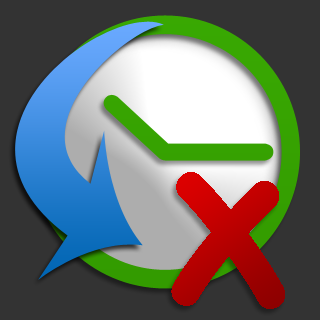
<style>
.page{position:relative;width:320px;height:320px;background:#333333}
.page>*{position:absolute;margin:0}
.t1{font:257.2px "AppleCasual"}
</style>
<div class="page">
<p class="t1" style="left:171px;top:172px;width:114px;height:137px">x</p>
</div>
